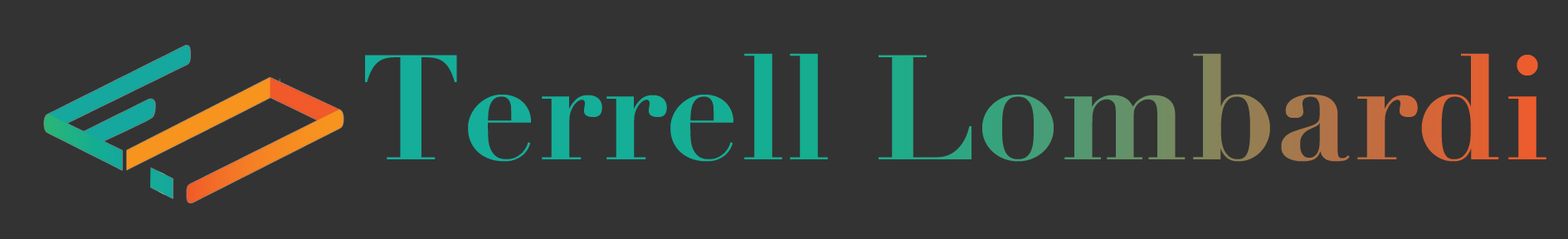
<style>
.page{position:relative;width:1568px;height:239px;background:#333333}
.page>*{position:absolute;margin:0}
.t1{font:146.3px "Didot-Bold"}
</style>
<div class="page">
<p class="t1" style="left:365px;top:53px;width:1181px;height:109px">Terrell Lombardi</p>
</div>
